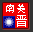
<style>
.page{position:relative;width:33px;height:32px;background:#f20000}
.page>*{position:absolute;margin:0}
.t1{font:10.4px "SimSun";color:#ffffff}
.t2{font:11.7px "SimSun";color:#ffffff}
</style>
<div class="page">
<p class="t1" style="left:6px;top:4px;width:19px;height:9px">南美</p>
<p class="t2" style="left:16px;top:15px;width:11px;height:12px">晋</p>
</div>
